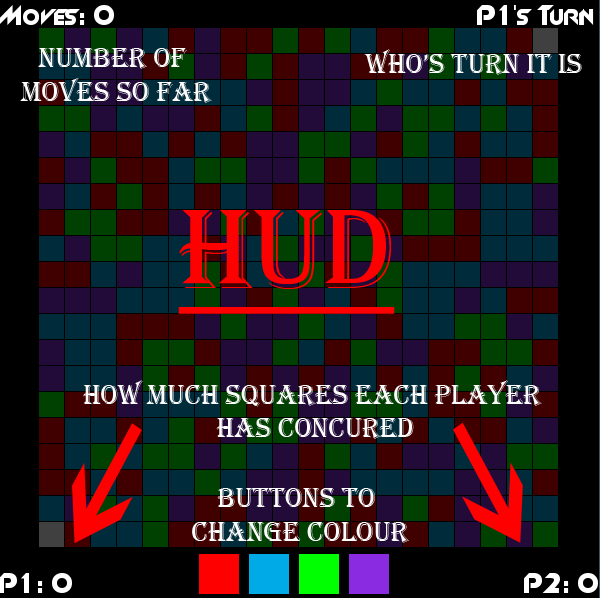
<style>
.page{position:relative;width:600px;height:598px;background:#000000}
.page>*{position:absolute;margin:0}
.t1{font:28px "Algerian";color:#fefefe}
.t2{font:117px "Algerian";color:#ff0000;text-decoration:underline}
</style>
<div class="page">
<p class="t1" style="left:20px;top:48px;width:192px;height:55px;text-align:center">Number of <br>moves so far</p>
<p class="t1" style="left:364px;top:49px;width:218px;height:26px">Who’s turn it is</p>
<p class="t2" style="left:178px;top:210px;width:217px;height:104px">HUD</p>
<p class="t1" style="left:83px;top:380px;width:459px;height:59px;text-align:center">how much squares each player<br> has concured</p>
<p class="t1" style="left:192px;top:488px;width:217px;height:55px;text-align:center">Buttons to<br> change colour</p>
</div>
